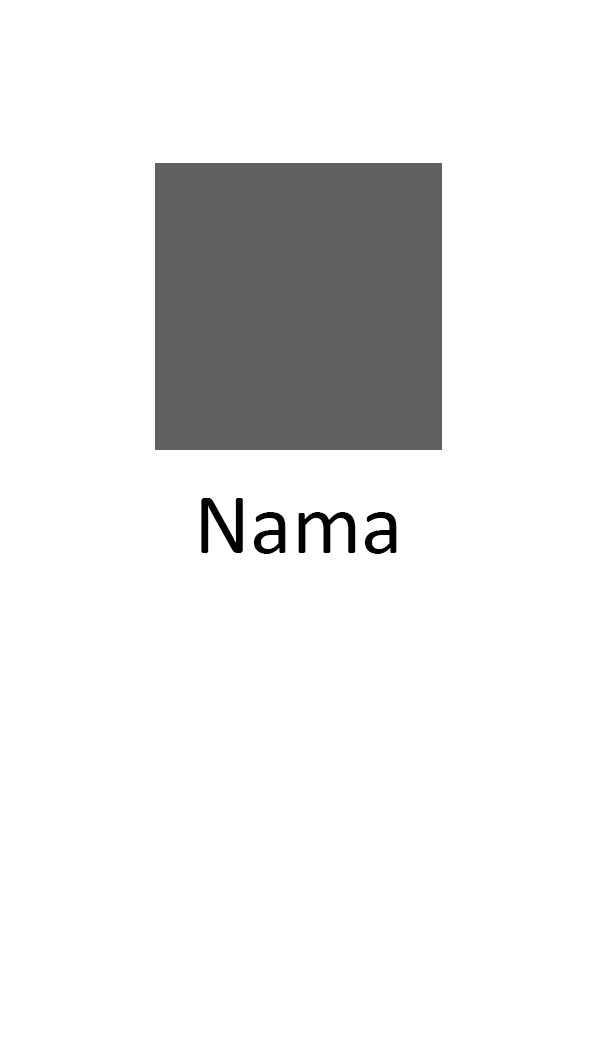
<style>
.page{position:relative;width:591px;height:1063px;background:#ffffff}
.page>*{position:absolute;margin:0}
.t1{font:87.2px "Calibri";color:#000000}
</style>
<div class="page">
<p class="t1" style="left:201px;top:498px;width:196px;height:56px">Nama</p>
</div>
